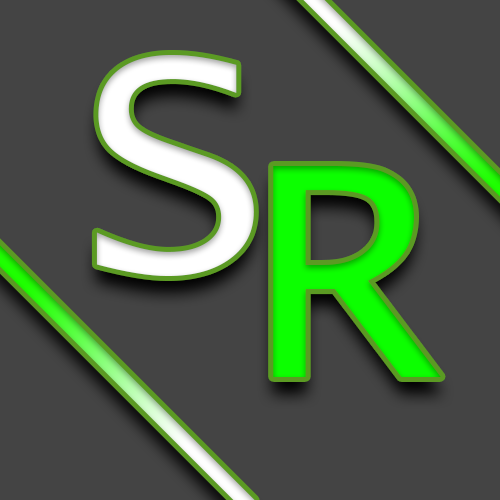
<style>
.page{position:relative;width:500px;height:500px;background:#444444}
.page>*{position:absolute;margin:0}
.t1{font:337px "LucidaConsole";color:#ffffff}
.t2{font:337px "LucidaConsole";color:#0cff00}
</style>
<div class="page">
<p class="t1" style="left:96px;top:55px;width:158px;height:221px">S</p>
<p class="t2" style="left:273px;top:166px;width:168px;height:211px">R</p>
</div>
